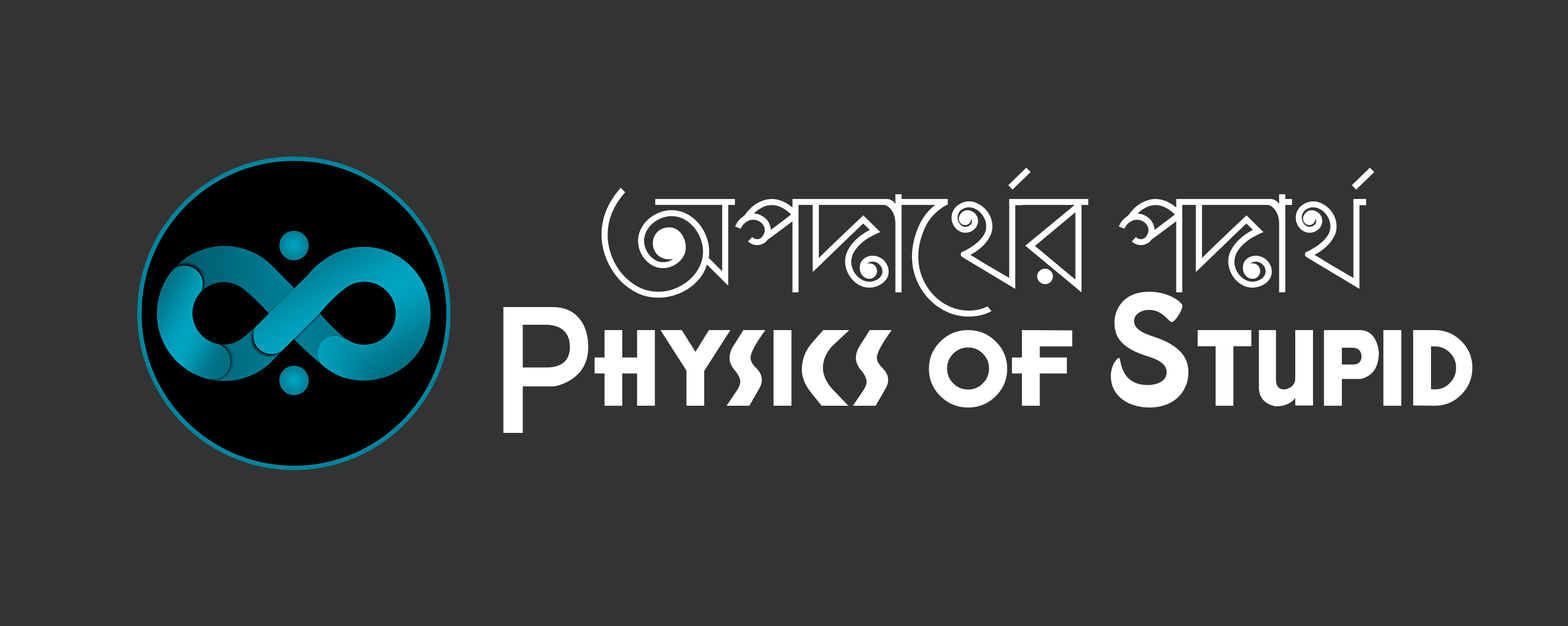
<style>
.page{position:relative;width:1568px;height:626px;background:#333333}
.page>*{position:absolute;margin:0}
.t1{font:149.9px "LiAzadPoriUnicode";color:#ffffff}
.t2{font:134.5px "HonestJohns";color:#ffffff}
.t3{font:134.5px "HoboStd";color:#ffffff}
</style>
<div class="page">
<p class="t1" style="left:601px;top:167px;width:773px;height:149px">অপদার্থের পদার্থ</p>
<p class="t2" style="left:503px;top:292px;width:969px;height:141px">Physics of <span class="t3">S</span>tupid</p>
</div>
